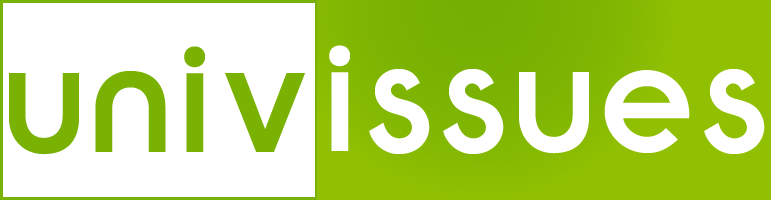
<style>
.page{position:relative;width:771px;height:200px;background:#ffffff}
.page>*{position:absolute;margin:0}
.t1{font:160px "Ronda-Medium";color:#79b202}
.t2{font:160px "Ronda-Medium";color:#ffffff}
</style>
<div class="page">
<p class="t1" style="left:9px;top:46px;width:296px;height:109px">univ</p>
<p class="t2" style="left:329px;top:45px;width:436px;height:109px">issues</p>
</div>
